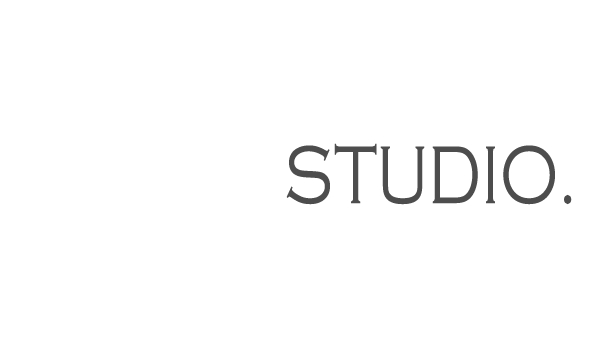
<style>
.page{position:relative;width:615px;height:345px;background:#ffffff}
.page>*{position:absolute;margin:0}
.t1{font:145.3px "CopperplateGothic-Light";color:#4d4d4d;scale:0.76 1}
</style>
<div class="page">
<p class="t1" style="left:286px;top:143px;width:286px;height:62px">STUDIO.</p>
</div>
